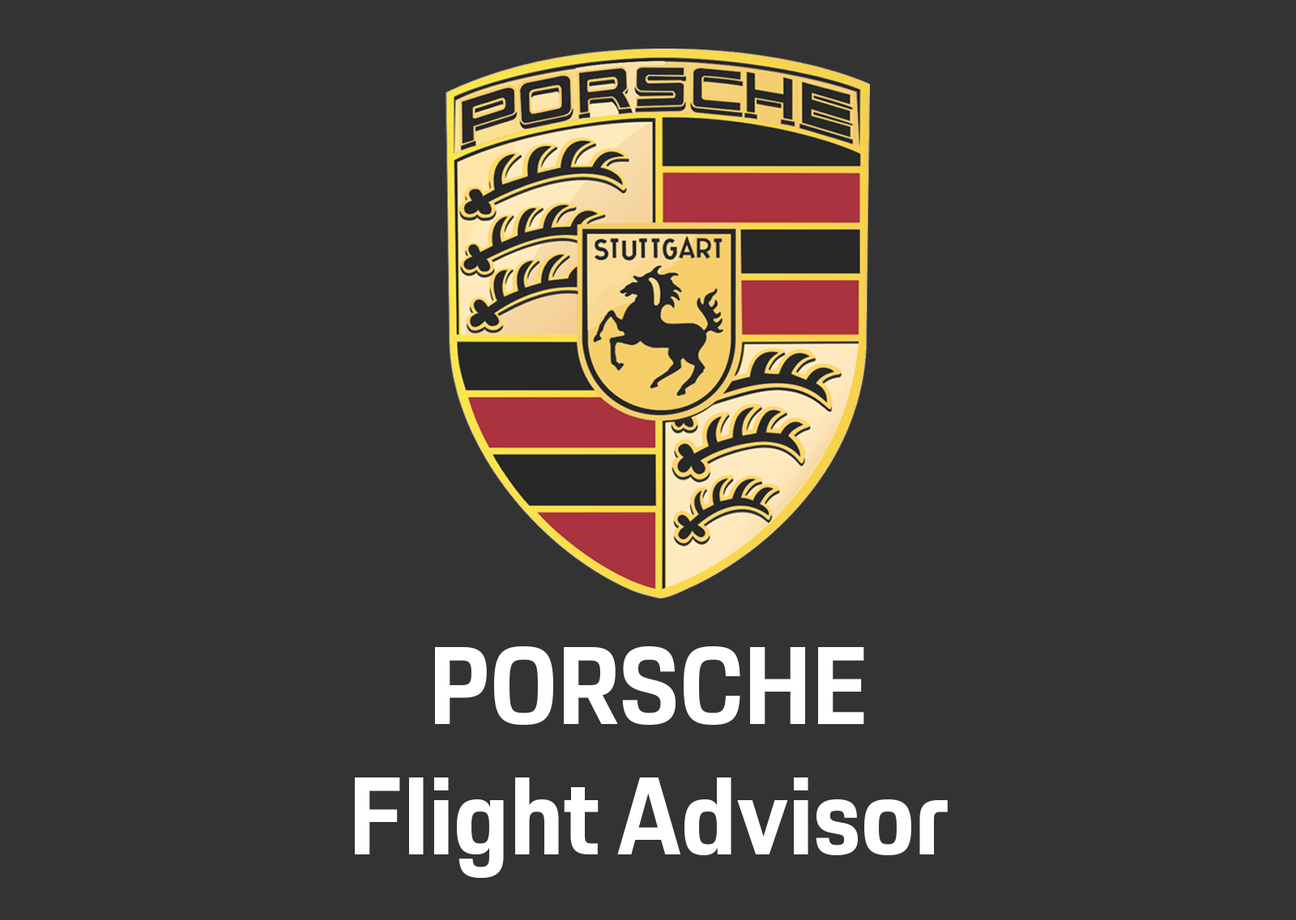
<style>
.page{position:relative;width:1296px;height:920px;background:#333333}
.page>*{position:absolute;margin:0}
.t1{font:108.1px "PorscheNext-Bold";color:#ffffff}
</style>
<div class="page">
<p class="t1" style="left:355px;top:646px;width:593px;height:232px;text-align:center">PORSCHE<br>Flight Advisor</p>
</div>
